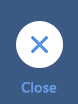
<style>
.page{position:relative;width:78px;height:104px;background:#3a5983}
.page>*{position:absolute;margin:0}
.t1{font:14px "SegoeUI";color:#669ce5;font-weight:bold}
</style>
<div class="page">
<p class="t1" style="left:21px;top:82px;width:36px;height:11px">Close</p>
</div>
